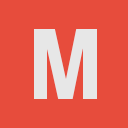
<style>
.page{position:relative;width:128px;height:128px;background:#e74c3c}
.page>*{position:absolute;margin:0}
.t1{font:100px "BebasNeue";color:#e7e7e7;scale:1.35 1}
</style>
<div class="page">
<p class="t1" style="left:34px;top:29px;width:63px;height:70px">M</p>
</div>
